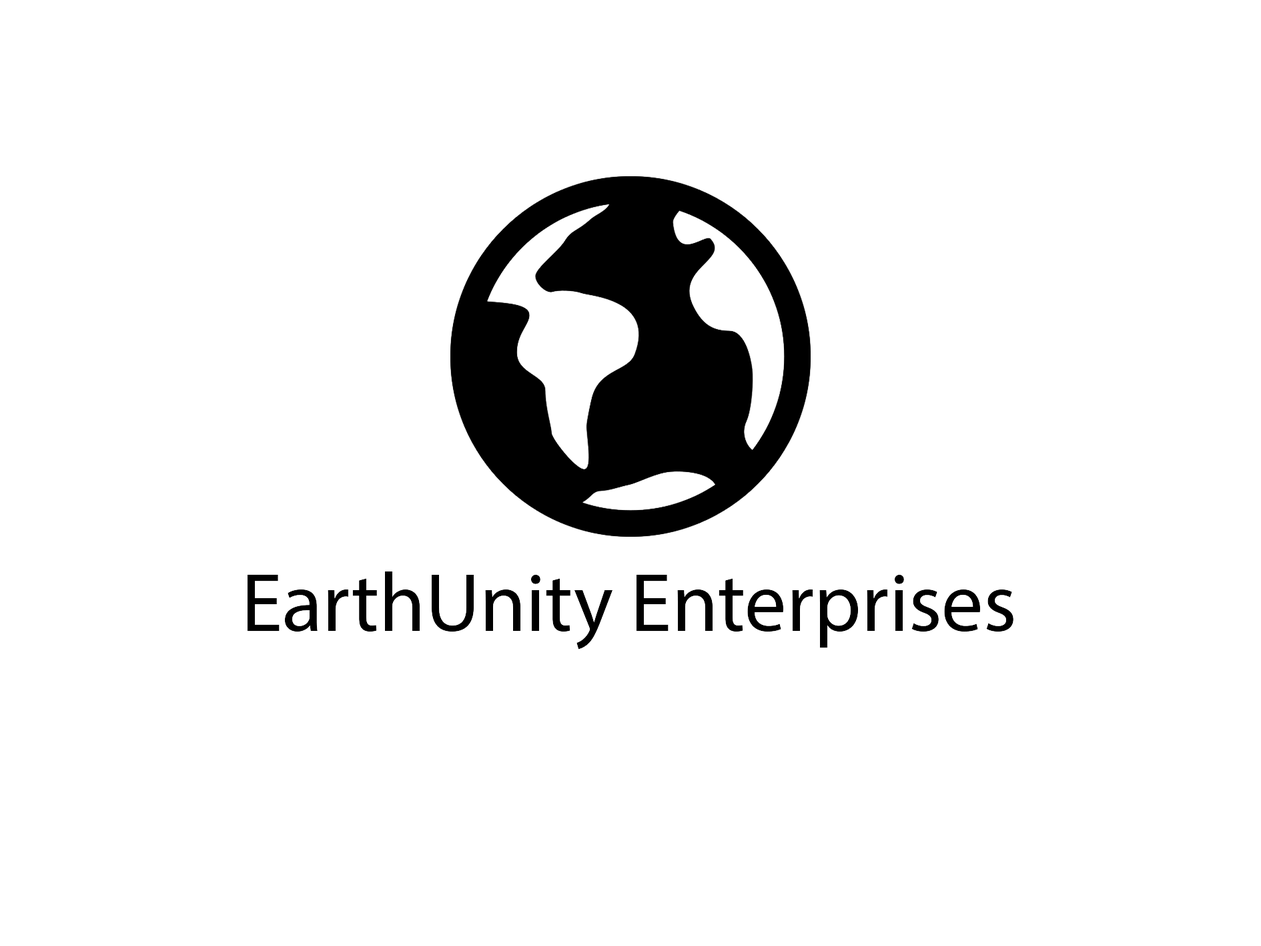
<style>
.page{position:relative;width:1261px;height:946px;background:#ffffff}
.page>*{position:absolute;margin:0}
.t1{font:83.4px "MyriadPro-Regular";color:#000000}
</style>
<div class="page">
<p class="t1" style="left:248px;top:571px;width:766px;height:78px">EarthUnity Enterprises</p>
</div>
